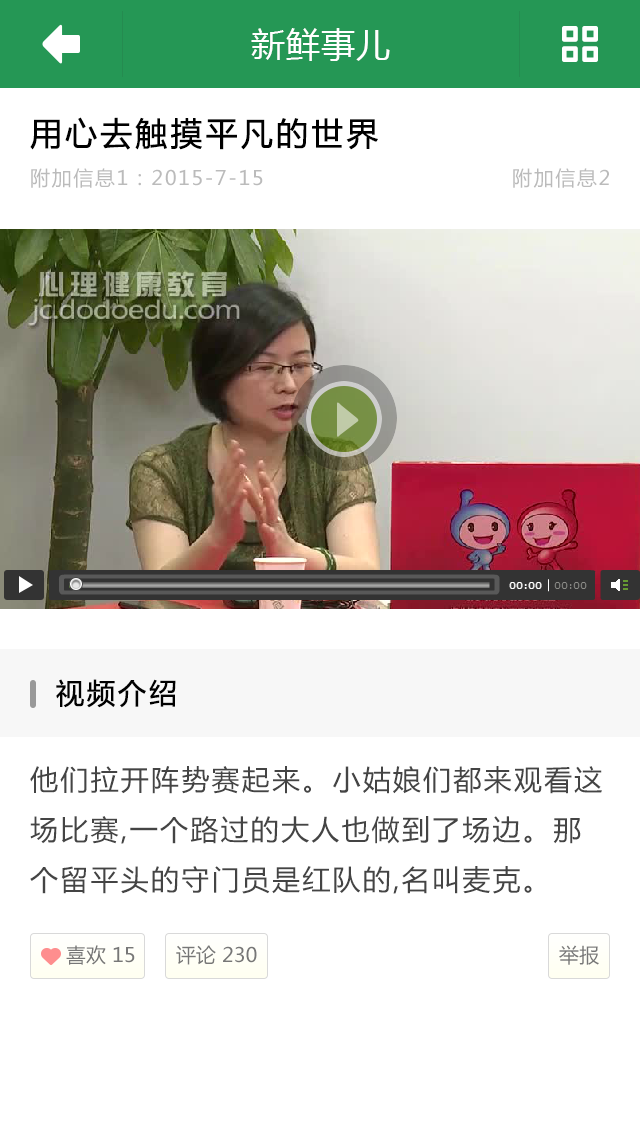
<style>
.page{position:relative;width:640px;height:1136px;background:#ffffff}
.page>*{position:absolute;margin:0}
.t1{font:32px "MicrosoftYaHei";letter-spacing:0.08em;color:#000000;font-weight:bold}
.t2{font:20px "MicrosoftYaHei";letter-spacing:0.08em;color:#bbbbbb}
.t3{font:28px "MicrosoftYaHei";letter-spacing:0.08em;color:#000000;font-weight:bold}
.t4{font:28px/50px "MicrosoftYaHei";letter-spacing:0.08em;color:#444444}
.t5{font:20px "MicrosoftYaHei";color:#777777}
</style>
<div class="page">
<p class="t1" style="left:30px;top:117px;width:348px;height:33px">用心去触摸平凡的世界</p>
<p class="t2" style="left:31px;top:168px;width:232px;height:20px">附加信息1：2015-7-15</p>
<p class="t2" style="left:513px;top:168px;width:96px;height:20px">附加信息2</p>
<p class="t3" style="left:56px;top:679px;width:120px;height:29px">视频介绍</p>
<p class="t4" style="left:30px;top:766px;width:572px;height:128px">他们拉开阵势赛起来。小姑娘们都来观看这场比赛,一个路过的大人也做到了场边。那个留平头的守门员是红队的,名叫麦克。</p>
<p class="t5" style="left:66px;top:945px;width:69px;height:20px">喜欢 15</p>
<p class="t5" style="left:176px;top:945px;width:81px;height:20px">评论 230</p>
<p class="t5" style="left:559px;top:945px;width:40px;height:20px">举报</p>
</div>
